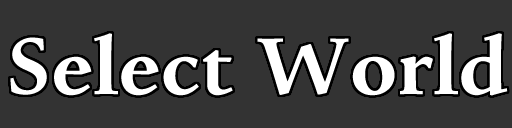
<style>
.page{position:relative;width:512px;height:128px;background:#333333}
.page>*{position:absolute;margin:0}
.t1{font:85px "Pescadero-Bold";color:#ffffff}
</style>
<div class="page">
<p class="t1" style="left:10px;top:33px;width:498px;height:63px">Select World</p>
</div>
